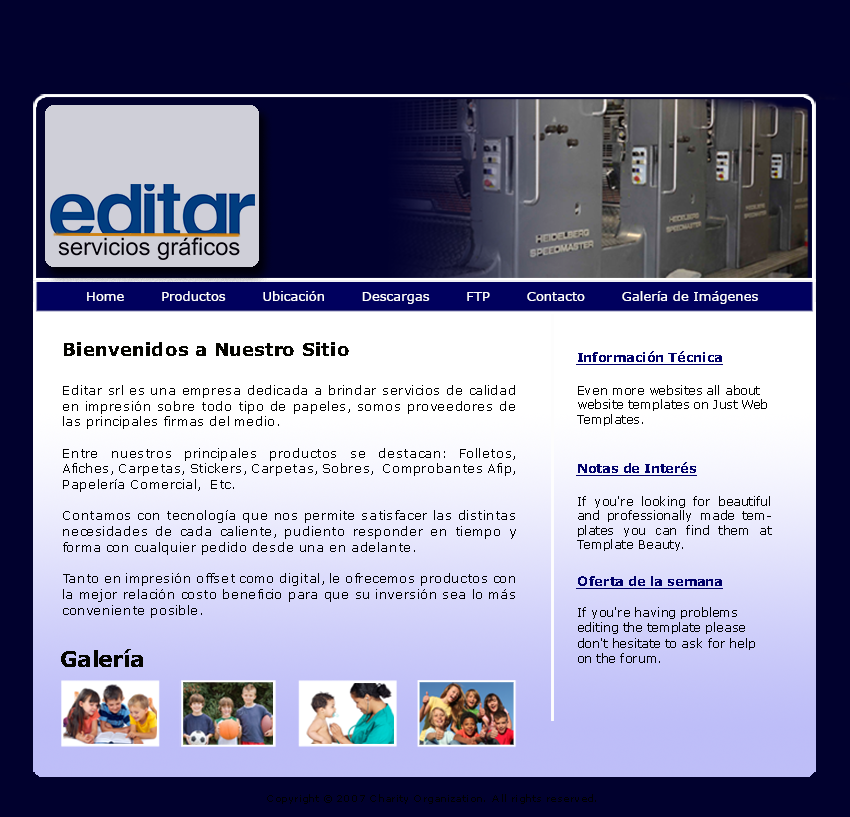
<style>
.page{position:relative;width:850px;height:817px;background:#01012e}
.page>*{position:absolute;margin:0}
.t1{font:13.1px "Verdana";color:#ffffff}
.t2{font:18px "Verdana-Bold";color:#050500}
.t3{font:13.1px "Verdana-Bold";color:#01016a;text-decoration:underline}
.t4{font:13.1px "Verdana";color:#000000}
.t5{font:12px "Verdana";color:#000000}
.t6{font:12px "Verdana";color:#010101}
.t7{font:12px/15.3px "Verdana";color:#000000}
.t8{font:22.3px "Verdana-Bold";color:#050500}
.t9{font:9.8px "Verdana";color:#000000}
</style>
<div class="page">
<p class="t1" style="left:87px;top:291px;width:671px;height:13px">Home        Productos        Ubicación        Descargas        FTP        Contacto        Galería de Imágenes</p>
<p class="t2" style="left:64px;top:342px;width:285px;height:14px">Bienvenidos a Nuestro Sitio</p>
<p class="t3" style="left:576px;top:351px;width:147px;height:14px">Información Técnica</p>
<p class="t4" style="left:63px;top:385px;width:453px;height:233px;text-align:justify">Editar srl es una empresa dedicada a brindar servicios de calidad en impresión sobre todo tipo de papeles, somos proveedores de las principales firmas del medio.<br><br>Entre nuestros principales productos se destacan: Folletos, Afiches, Carpetas, Stickers, Carpetas, Sobres,  Comprobantes Afip, Papelería Comercial,  Etc.<br><br>Contamos con tecnología que nos permite satisfacer las distintas necesidades de cada caliente, pudiento responder en tiempo y forma con cualquier pedido desde una en adelante.<br><br>Tanto en impresión offset como digital, le ofrecemos productos con la mejor relación costo beneficio para que su inversión sea lo más conveniente posible.</p>
<p class="t5" style="left:577px;top:385px;width:190px;height:41px">Even more websites all about website templates on Just Web Templates.</p>
<p class="t3" style="left:576px;top:462px;width:121px;height:14px">Notas de Interés</p>
<p class="t6" style="left:577px;top:496px;width:195px;height:55px;text-align:justify">If you're looking for beautiful and professionally made templates you can find them at Template Beauty.</p>
<p class="t3" style="left:576px;top:576px;width:147px;height:13px">Oferta de la semana</p>
<p class="t7" style="left:578px;top:607px;width:177px;height:56px">If you're having problems editing the template please don't hesitate to ask for help on the forum.</p>
<p class="t8" style="left:61px;top:649px;width:82px;height:18px">Galería</p>
<p class="t9" style="left:267px;top:794px;width:329px;height:10px">Copyright © 2007 Charity Organization.  All rights reserved.</p>
</div>
